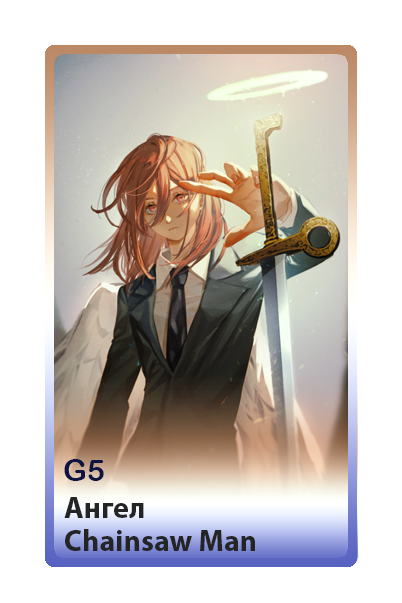
<style>
.page{position:relative;width:402px;height:603px;background:#ffffff}
.page>*{position:absolute;margin:0}
.t1{font:30px "ArialRoundedMTBold";color:#0e1341}
.t2{font:30px "MyriadPro-Bold";color:#242424}
</style>
<div class="page">
<p class="t1" style="left:64px;top:459px;width:40px;height:22px">G5</p>
<p class="t2" style="left:64px;top:497px;width:80px;height:21px">Ангел</p>
<p class="t2" style="left:65px;top:529px;width:190px;height:22px">Chainsaw Man</p>
</div>
